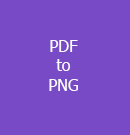
<style>
.page{position:relative;width:130px;height:135px;background:#784ac5}
.page>*{position:absolute;margin:0}
.t1{font:12px "Tahoma";color:#fcfcfa}
</style>
<div class="page">
<p class="t1" style="left:49px;top:40px;width:29px;height:51px;text-align:center">PDF<br>to<br>PNG</p>
</div>
